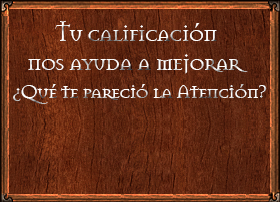
<style>
.page{position:relative;width:280px;height:202px}
.page>*{position:absolute;margin:0}
.t1{font:24.4px "Mason-Regular";letter-spacing:-0.06em}
.t2{font:21px "Mason-Regular";letter-spacing:-0.06em}
</style>
<div class="page">
<p class="t1" style="left:28px;top:21px;width:220px;height:53px;text-align:center">Tu calificación <br>nos ayuda a mejorar</p>
<p class="t2" style="left:13px;top:84px;width:254px;height:20px">¿Qué te pareció la Atención?</p>
</div>
